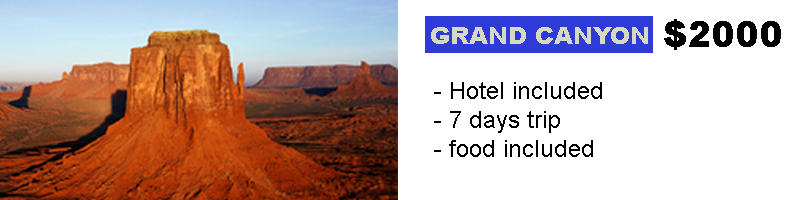
<style>
.page{position:relative;width:800px;height:200px;background:#ffffff}
.page>*{position:absolute;margin:0}
.t1{font:24px "Arial-Black";color:#d5d8c3}
.t2{font:36px "Arial-Black";color:#000000}
.t3{font:24px "ArialMT";color:#000000}
</style>
<div class="page">
<p class="t1" style="left:431px;top:27px;width:217px;height:17px">GRAND CANYON</p>
<p class="t2" style="left:664px;top:19px;width:117px;height:31px">$2000</p>
<p class="t3" style="left:434px;top:82px;width:168px;height:75px">- Hotel included<br> - 7 days trip<br> - food included</p>
</div>
